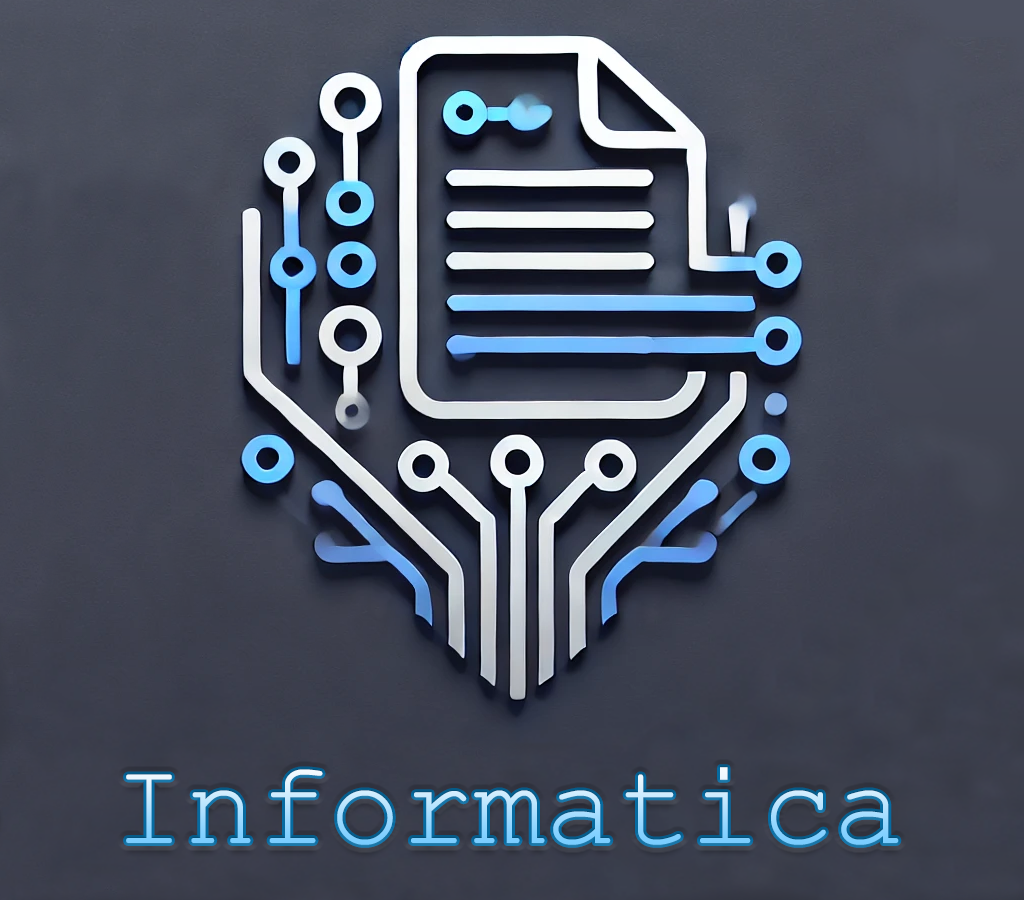
<style>
.page{position:relative;width:1024px;height:900px}
.page>*{position:absolute;margin:0}
.t1{font:120px "CourierNewPSMT"}
</style>
<div class="page">
<p class="t1" style="left:126px;top:767px;width:773px;height:78px">Informatica</p>
</div>
